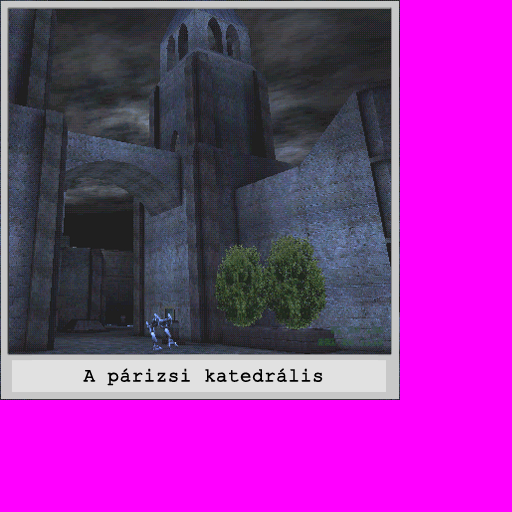
<style>
.page{position:relative;width:512px;height:512px;background:#ff00ff}
.page>*{position:absolute;margin:0}
.t1{font:19.2px "CourierNewPSMT";color:#000000;font-weight:bold}
</style>
<div class="page">
<p class="t1" style="left:83px;top:368px;width:240px;height:18px">A párizsi katedrális</p>
</div>
